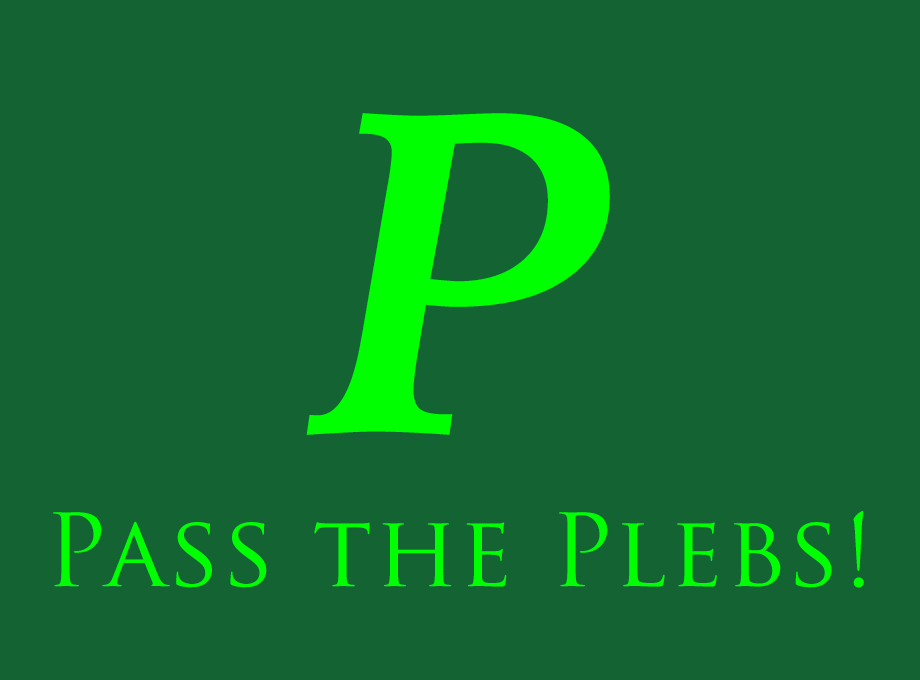
<style>
.page{position:relative;width:920px;height:680px;background:#136333}
.page>*{position:absolute;margin:0}
.t1{font:480.7px "IowanOldStyle-BoldItalic";letter-spacing:0.025em;color:#00ff00}
.t2{font:98.1px "TrajanPro-Regular";letter-spacing:0.025em;color:#00ff01}
</style>
<div class="page">
<p class="t1" style="left:306px;top:113px;width:304px;height:322px">P</p>
<p class="t2" style="left:53px;top:511px;width:811px;height:77px">Pass the Plebs!</p>
</div>
